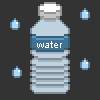
<style>
.page{position:relative;width:100px;height:100px;background:#333333}
.page>*{position:absolute;margin:0}
.t1{font:10px "ArialMT";color:#ffffff}
</style>
<div class="page">
<p class="t1" style="left:37px;top:41px;width:25px;height:7px">water</p>
</div>
